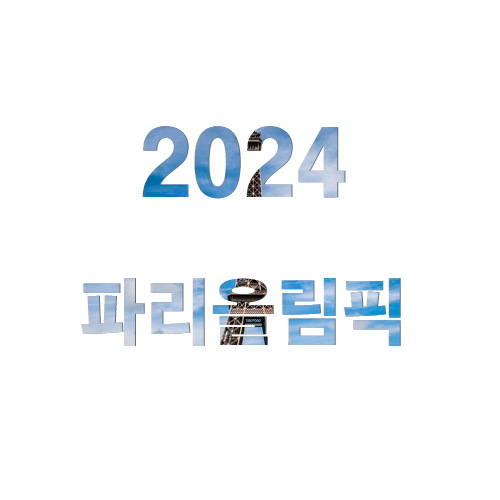
<style>
.page{position:relative;width:500px;height:500px;background:#ffffff}
.page>*{position:absolute;margin:0}
.t1{font:72px "ChosunBg"}
.t2{font:90px "ChosunBg"}
</style>
<div class="page">
<p class="t1" style="left:81px;top:126px;width:319px;height:220px;text-align:center"><span class="t2">2024<br></span>파리올림픽</p>
</div>
